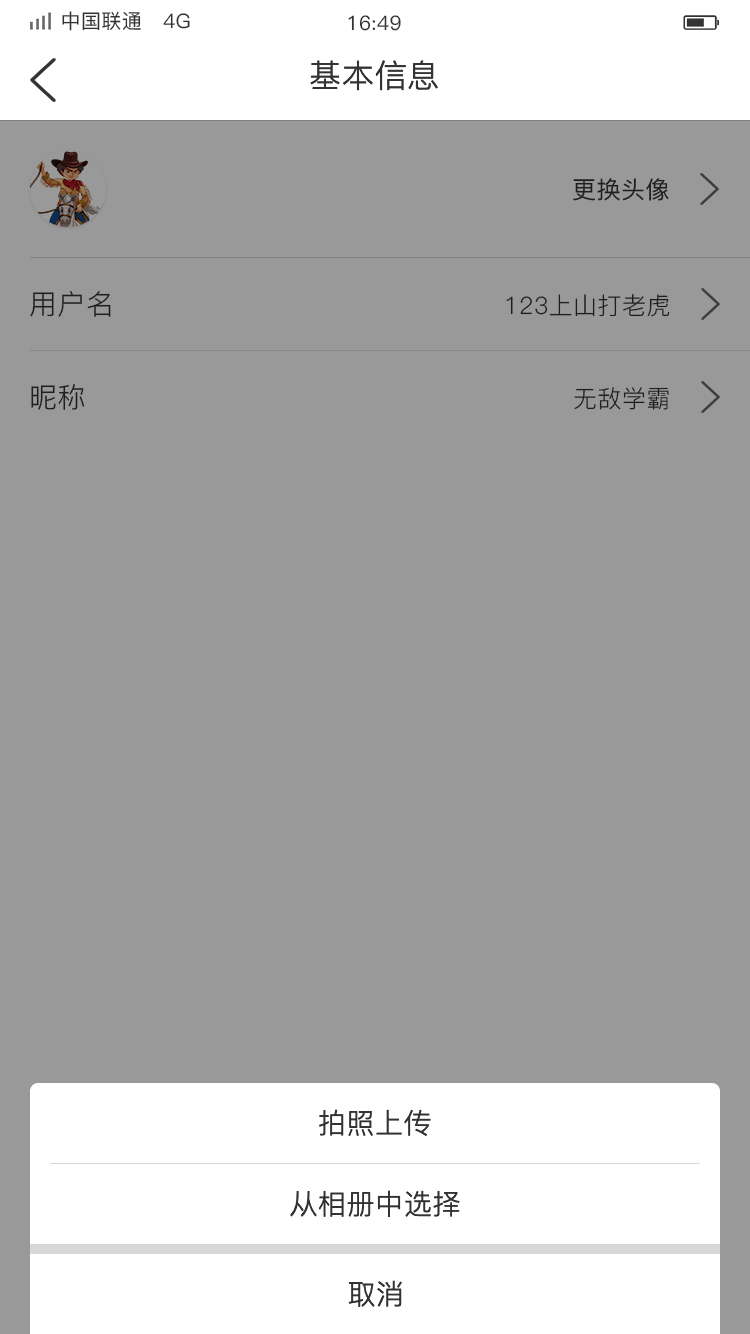
<style>
.page{position:relative;width:750px;height:1334px;background:#999999}
.page>*{position:absolute;margin:0}
.t1{font:20px "PingFang-SC-Medium";letter-spacing:0.02em;color:#333333}
.t2{font:32px "PingFang-SC-Regular";letter-spacing:0.02em;color:#333333}
.t3{font:24px "PingFang-SC-Medium";letter-spacing:0.02em;color:#333333}
.t4{font:28px "PingFang-SC-Regular";letter-spacing:0.02em;color:#333333}
.t5{font:24px "PingFang-SC-Regular";letter-spacing:0.02em;color:#333333}
</style>
<div class="page">
<p class="t1" style="left:62px;top:11px;width:128px;height:20px">中国联通   4G</p>
<p class="t1" style="left:348px;top:15px;width:53px;height:16px">16:49</p>
<p class="t2" style="left:310px;top:60px;width:128px;height:31px">基本信息</p>
<p class="t3" style="left:573px;top:178px;width:96px;height:23px">更换头像</p>
<p class="t4" style="left:30px;top:291px;width:81px;height:26px">用户名</p>
<p class="t5" style="left:506px;top:294px;width:164px;height:23px">123上山打老虎</p>
<p class="t4" style="left:31px;top:384px;width:54px;height:26px">昵称</p>
<p class="t5" style="left:574px;top:387px;width:95px;height:23px">无敌学霸</p>
<p class="t4" style="left:319px;top:1109px;width:112px;height:27px">拍照上传</p>
<p class="t4" style="left:290px;top:1190px;width:170px;height:27px">从相册中选择</p>
<p class="t4" style="left:348px;top:1280px;width:54px;height:27px">取消</p>
</div>
